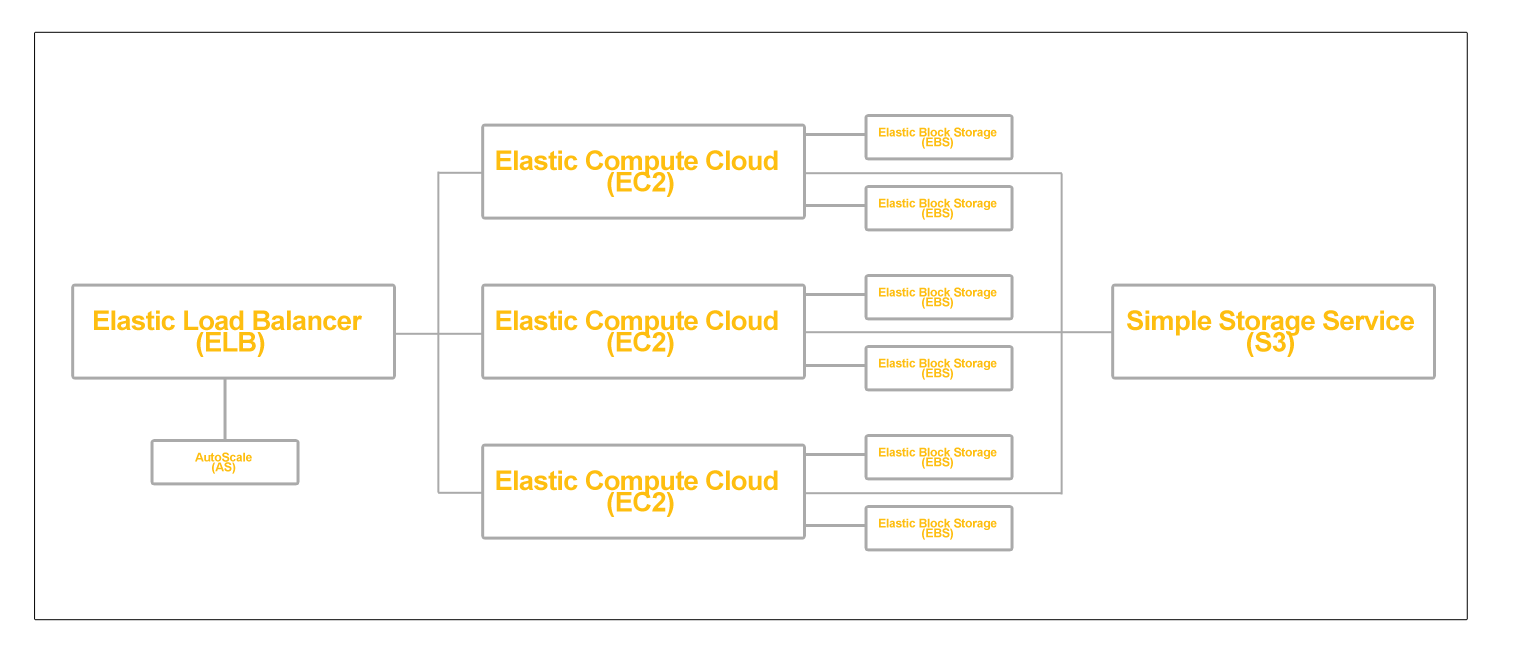
<style>
.page{position:relative;width:1523px;height:655px;background:#ffffff}
.page>*{position:absolute;margin:0}
.t1{font:12.2px/9.6px "Arial-BoldMT";letter-spacing:-0.025em;color:#febe10}
.t2{font:27.3px/21.5px "Arial-BoldMT";letter-spacing:-0.025em;color:#febe10}
</style>
<div class="page">
<p class="t1" style="left:879px;top:127px;width:118px;height:22px;text-align:center">Elastic Block Storage<br>(EBS)</p>
<p class="t2" style="left:496px;top:150px;width:282px;height:47px;text-align:center">Elastic Compute Cloud <br>(EC2)</p>
<p class="t1" style="left:879px;top:198px;width:118px;height:22px;text-align:center">Elastic Block Storage<br>(EBS)</p>
<p class="t1" style="left:879px;top:287px;width:118px;height:22px;text-align:center">Elastic Block Storage<br>(EBS)</p>
<p class="t2" style="left:94px;top:310px;width:268px;height:47px;text-align:center">Elastic Load Balancer <br>(ELB)</p>
<p class="t2" style="left:496px;top:310px;width:282px;height:47px;text-align:center">Elastic Compute Cloud <br>(EC2)</p>
<p class="t2" style="left:1127px;top:310px;width:287px;height:47px;text-align:center">Simple Storage Service<br>(S3)</p>
<p class="t1" style="left:879px;top:358px;width:118px;height:22px;text-align:center">Elastic Block Storage<br>(EBS)</p>
<p class="t1" style="left:879px;top:447px;width:118px;height:22px;text-align:center">Elastic Block Storage<br>(EBS)</p>
<p class="t1" style="left:195px;top:452px;width:57px;height:22px;text-align:center">AutoScale<br>(AS)</p>
<p class="t2" style="left:496px;top:470px;width:282px;height:47px;text-align:center">Elastic Compute Cloud <br>(EC2)</p>
<p class="t1" style="left:879px;top:518px;width:118px;height:22px;text-align:center">Elastic Block Storage<br>(EBS)</p>
</div>
